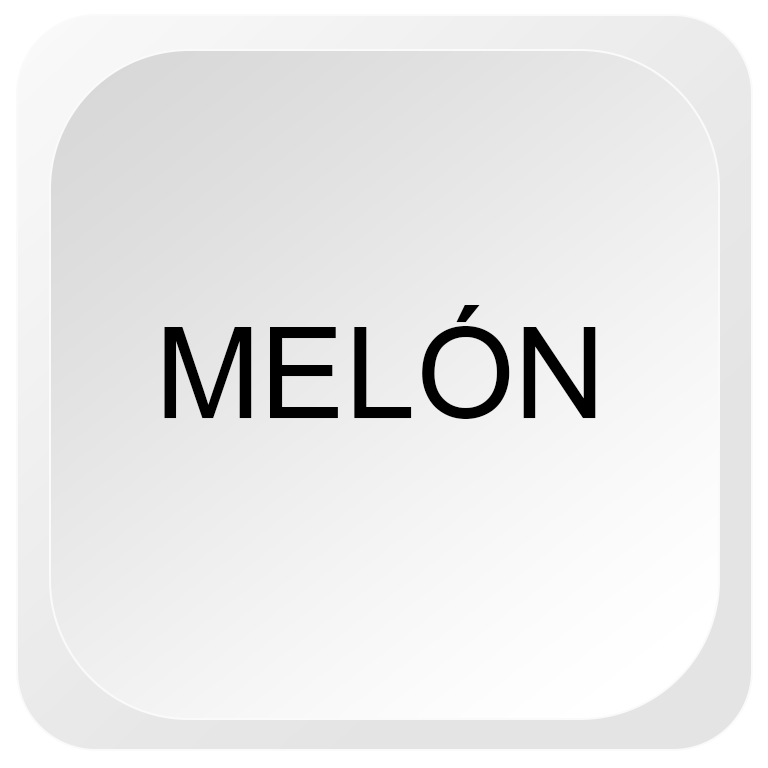
<style>
.page{position:relative;width:768px;height:768px}
.page>*{position:absolute;margin:0}
.t1{font:127px "ArialMT";color:#000000}
</style>
<div class="page">
<p class="t1" style="left:164px;top:305px;width:432px;height:114px">MELÓN</p>
</div>
